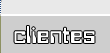
<style>
.page{position:relative;width:110px;height:53px;background:#cecece}
.page>*{position:absolute;margin:0}
.t1{font:24px "OrbitBbyBT-Regular";color:#ffffff}
</style>
<div class="page">
<p class="t1" style="left:14px;top:26px;width:81px;height:17px">clientes</p>
</div>
